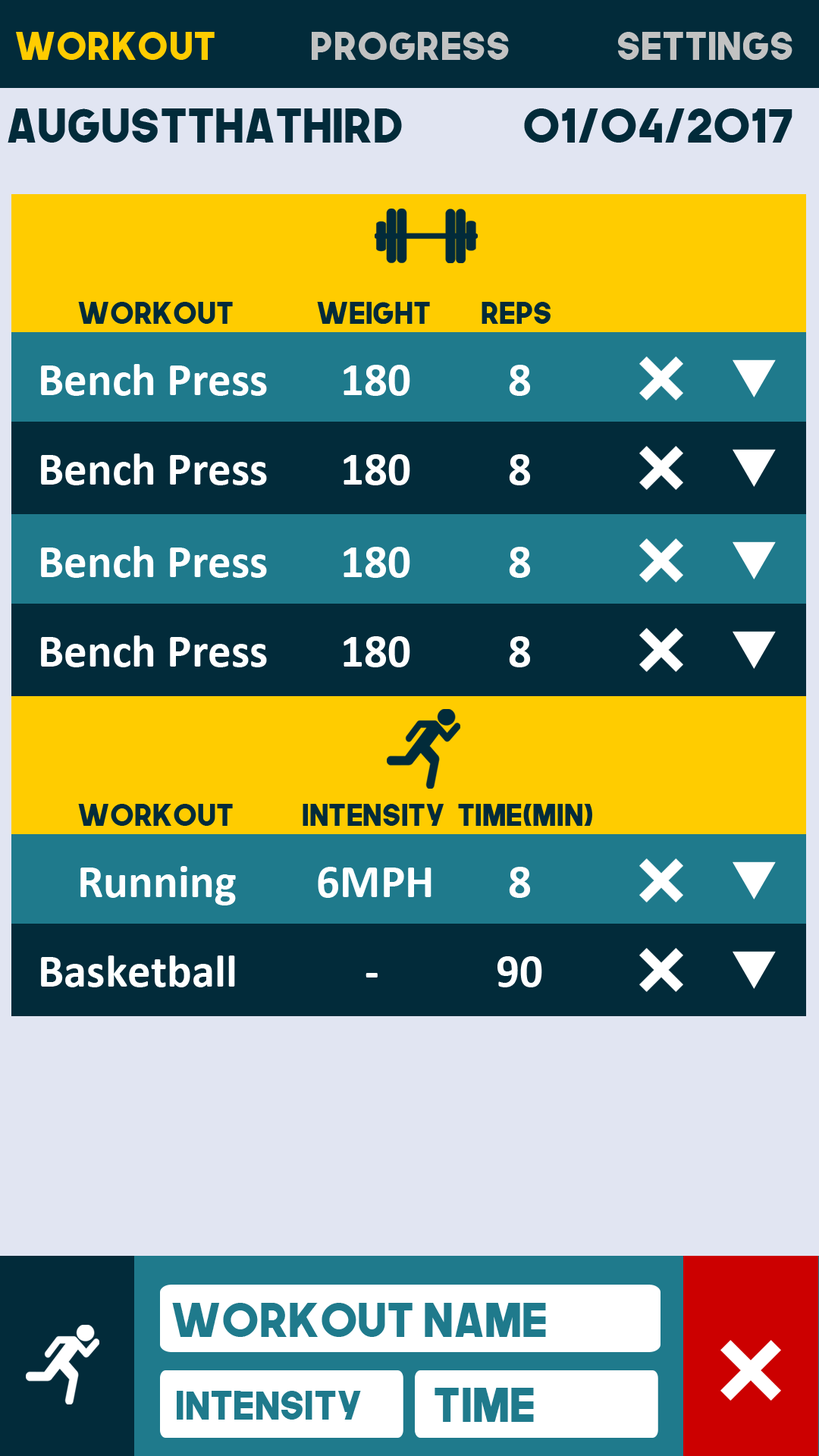
<style>
.page{position:relative;width:819px;height:1456px;background:#022b3a}
.page>*{position:absolute;margin:0}
.t1{font:38.3px "TheNextFont";color:#ffcc00}
.t2{font:38.3px "TheNextFont";color:#c2c2c2}
.t3{font:46.4px "TheNextFont";color:#022b3a}
.t4{font:29.7px "TheNextFont";color:#022b3a}
.t5{font:46.4px "Calibri-Bold";color:#ffffff}
.t6{font:46.4px "TheNextFont";color:#1f7a8c}
.t7{font:38.8px "TheNextFont";color:#1f7a8c}
</style>
<div class="page">
<p class="t1" style="left:16px;top:32px;width:199px;height:28px">Workout</p>
<p class="t2" style="left:312px;top:32px;width:197px;height:28px">Progress</p>
<p class="t2" style="left:618px;top:32px;width:174px;height:28px">Settings</p>
<p class="t3" style="left:8px;top:108px;width:394px;height:35px">AugustThaThird</p>
<p class="t3" style="left:524px;top:108px;width:268px;height:35px">01/04/2017</p>
<p class="t4" style="left:78px;top:302px;width:155px;height:22px">Workout</p>
<p class="t4" style="left:317px;top:302px;width:113px;height:22px">weight</p>
<p class="t4" style="left:482px;top:302px;width:69px;height:22px">Reps</p>
<p class="t5" style="left:41px;top:364px;width:226px;height:32px">Bench Press</p>
<p class="t5" style="left:344px;top:365px;width:66px;height:31px">180</p>
<p class="t5" style="left:509px;top:365px;width:21px;height:31px">8</p>
<p class="t5" style="left:41px;top:453px;width:226px;height:32px">Bench Press</p>
<p class="t5" style="left:344px;top:454px;width:66px;height:31px">180</p>
<p class="t5" style="left:509px;top:454px;width:21px;height:31px">8</p>
<p class="t5" style="left:41px;top:546px;width:226px;height:32px">Bench Press</p>
<p class="t5" style="left:344px;top:547px;width:66px;height:31px">180</p>
<p class="t5" style="left:509px;top:547px;width:21px;height:31px">8</p>
<p class="t5" style="left:41px;top:635px;width:226px;height:32px">Bench Press</p>
<p class="t5" style="left:344px;top:636px;width:66px;height:31px">180</p>
<p class="t5" style="left:509px;top:636px;width:21px;height:31px">8</p>
<p class="t4" style="left:78px;top:804px;width:155px;height:22px">Workout</p>
<p class="t4" style="left:303px;top:804px;width:141px;height:22px">Intensity</p>
<p class="t4" style="left:458px;top:804px;width:134px;height:22px">Time(min)</p>
<p class="t5" style="left:80px;top:866px;width:156px;height:39px">Running</p>
<p class="t5" style="left:318px;top:867px;width:113px;height:31px">6MPH</p>
<p class="t5" style="left:509px;top:867px;width:21px;height:31px">8</p>
<p class="t5" style="left:41px;top:955px;width:194px;height:32px">Basketball</p>
<p class="t5" style="left:497px;top:956px;width:45px;height:31px">90</p>
<p class="t5" style="left:366px;top:973px;width:12px;height:4px">-</p>
<p class="t6" style="left:172px;top:1303px;width:374px;height:34px">Workout Name</p>
<p class="t7" style="left:177px;top:1391px;width:184px;height:29px">Intensity</p>
<p class="t6" style="left:435px;top:1388px;width:99px;height:34px">Time</p>
</div>
